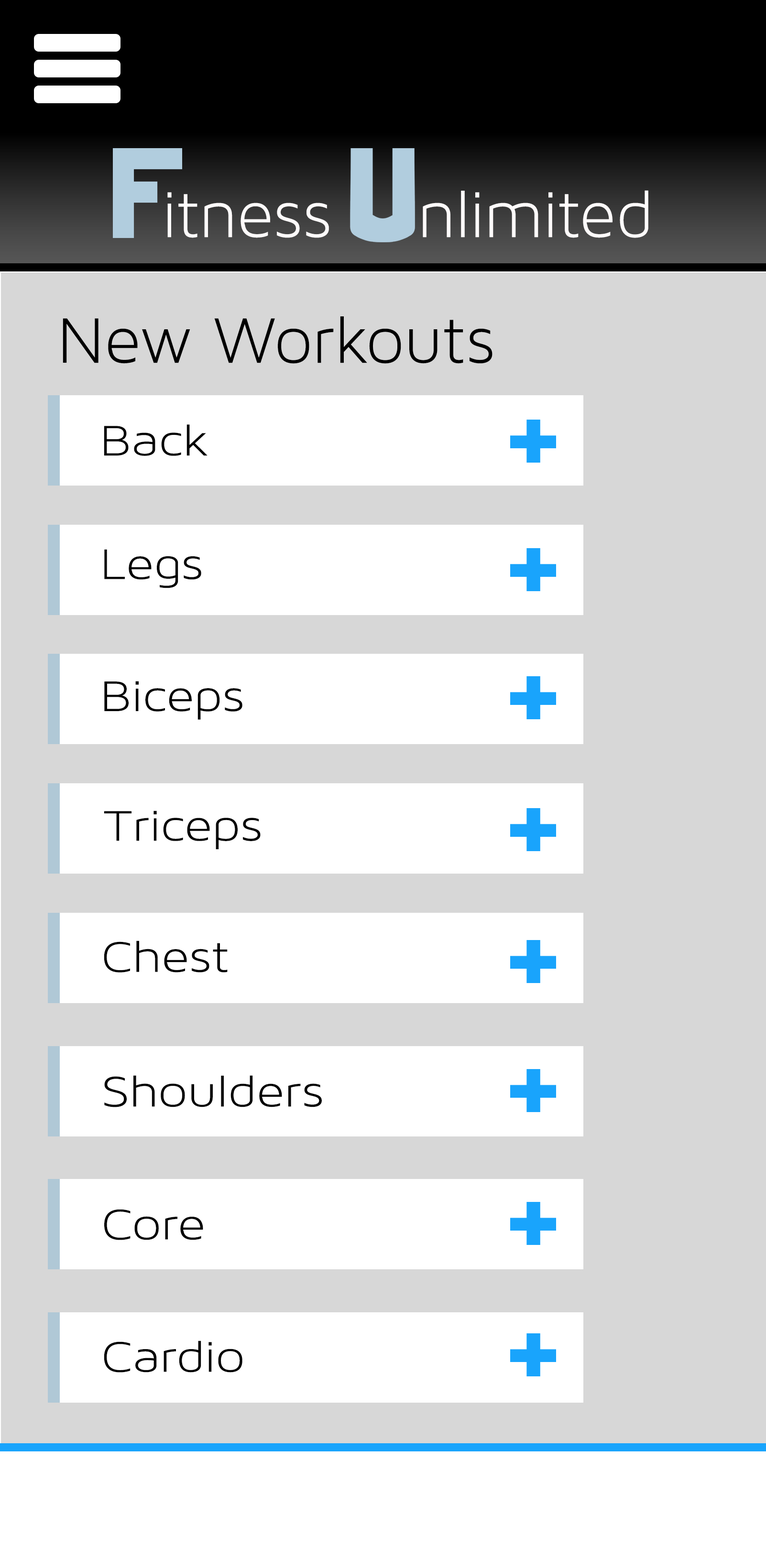
<style>
.page{position:relative;width:766px;height:1557px;background:#d7d7d7}
.page>*{position:absolute;margin:0}
.t1{font:68.9px "MavenProLight300-Regular";color:#fefbfb}
.t2{font:68.9px "MavenProLight300-Regular";color:#000000}
.t3{font:46px "MavenProLight300-Regular";color:#020202;scale:1.15 1}
</style>
<div class="page">
<p class="t1" style="left:167px;top:190px;width:481px;height:48px">itness    nlimited</p>
<p class="t2" style="left:63px;top:316px;width:429px;height:48px">New Workouts</p>
<p class="t3" style="left:104px;top:424px;width:103px;height:32px">Back</p>
<p class="t3" style="left:104px;top:549px;width:97px;height:39px">Legs</p>
<p class="t3" style="left:104px;top:681px;width:138px;height:39px">Biceps</p>
<p class="t3" style="left:104px;top:811px;width:156px;height:38px">Triceps</p>
<p class="t3" style="left:104px;top:941px;width:124px;height:32px">Chest</p>
<p class="t3" style="left:104px;top:1075px;width:218px;height:32px">Shoulders</p>
<p class="t3" style="left:104px;top:1209px;width:99px;height:31px">Core</p>
<p class="t3" style="left:104px;top:1341px;width:138px;height:32px">Cardio</p>
</div>
